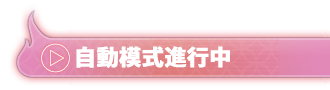
<style>
.page{position:relative;width:330px;height:90px;background:#ffffff}
.page>*{position:absolute;margin:0}
.t1{font:22px "SourceHanSansCN-Heavy";color:#ffffff;font-weight:bold}
</style>
<div class="page">
<p class="t1" style="left:76px;top:46px;width:154px;height:22px">自動模式進行中</p>
</div>
